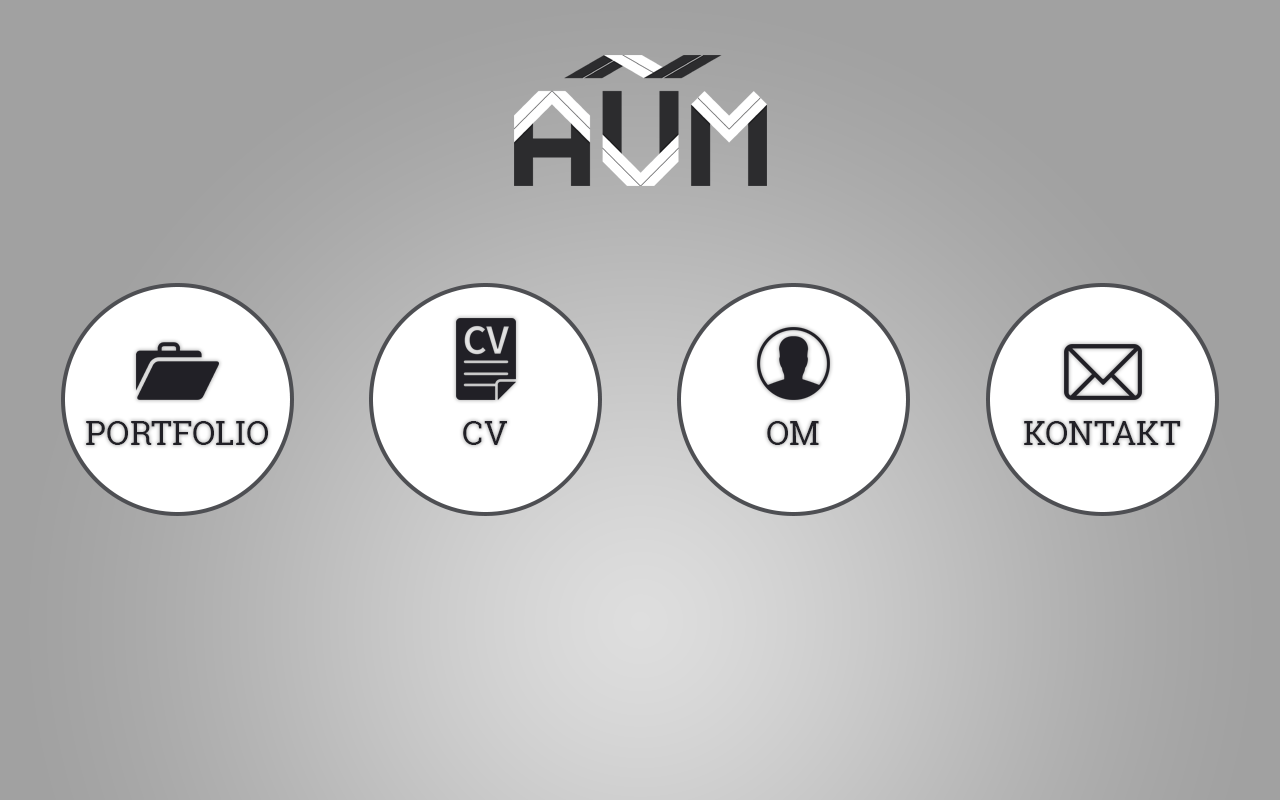
<style>
.page{position:relative;width:1280px;height:800px;background:#a1a1a1}
.page>*{position:absolute;margin:0}
.t1{font:33.3px "RobotoSlab-Regular";color:#0e171c}
</style>
<div class="page">
<p class="t1" style="left:86px;top:421px;width:182px;height:24px">PORTFOLIO</p>
<p class="t1" style="left:463px;top:421px;width:44px;height:24px">CV</p>
<p class="t1" style="left:767px;top:421px;width:52px;height:24px">OM</p>
<p class="t1" style="left:1024px;top:421px;width:157px;height:24px">KONTAKT</p>
</div>
